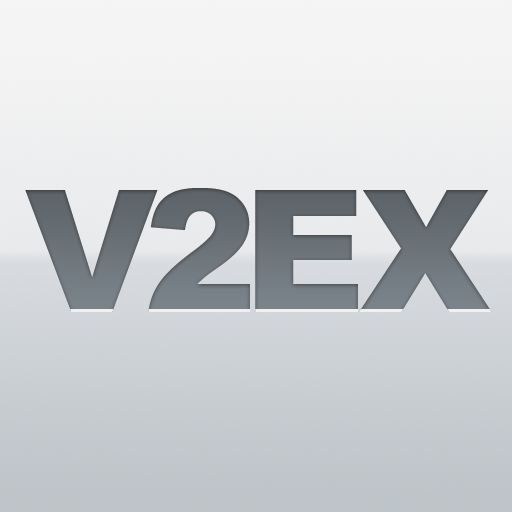
<style>
.page{position:relative;width:512px;height:512px}
.page>*{position:absolute;margin:0}
.t1{font:170px "Arial-Black";letter-spacing:-0.065em;color:#687076}
.t2{font:170px "Arial-Black";letter-spacing:-0.065em;color:#6a7278}
</style>
<div class="page">
<p class="t1" style="left:25px;top:190px;width:133px;height:122px">V</p>
<p class="t2" style="left:148px;top:188px;width:102px;height:124px">2</p>
<p class="t2" style="left:255px;top:190px;width:103px;height:122px">E</p>
<p class="t2" style="left:359px;top:190px;width:133px;height:122px">X</p>
</div>
